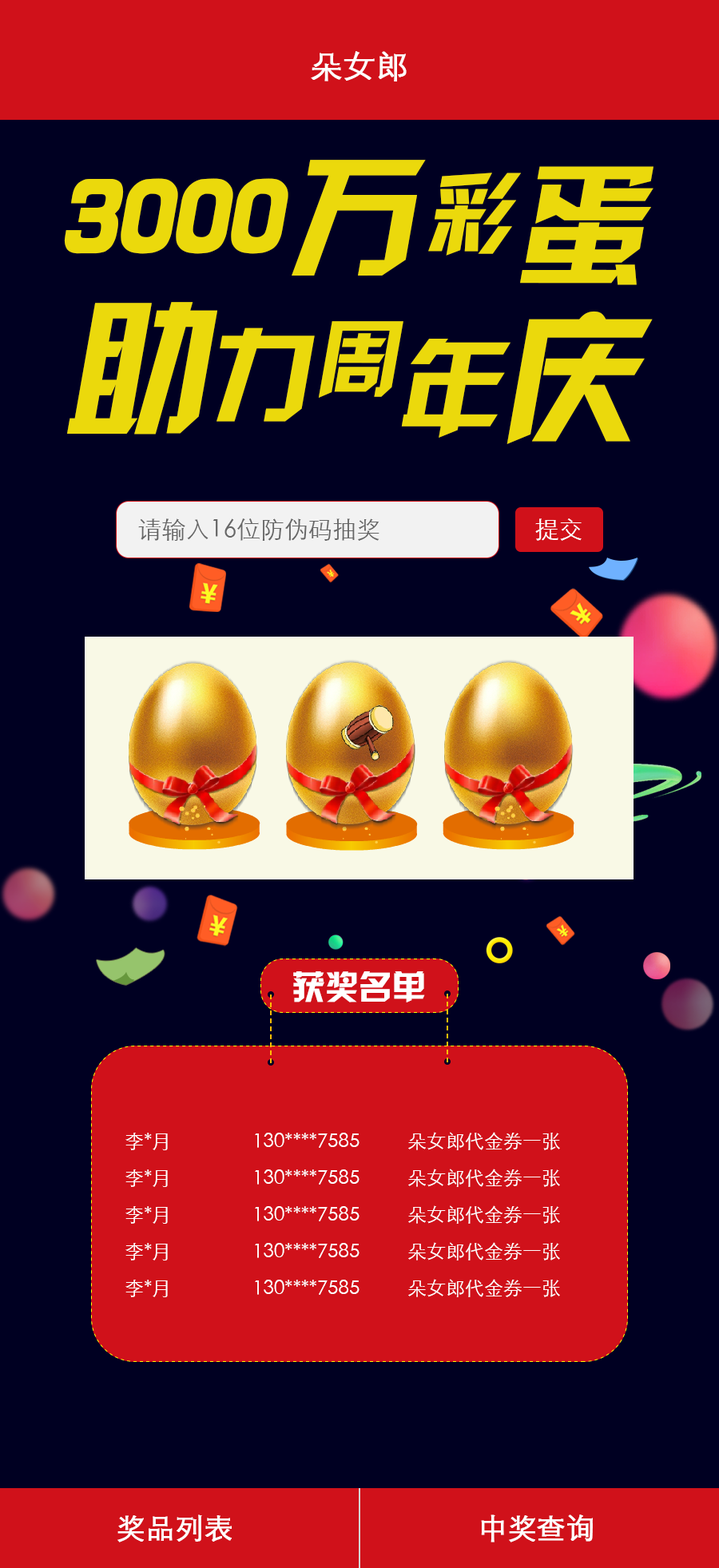
<style>
.page{position:relative;width:719px;height:1568px;background:#000022}
.page>*{position:absolute;margin:0}
.t1{font:32px "STXihei";color:#ffffff;font-weight:bold}
.t2{font:129.4px "JLinXin";color:#ebd90c;font-style:italic}
.t3{font:89.1px "JLinXin";color:#ebd90c;font-style:italic}
.t4{font:131.7px "JLinXin";color:#ebd90c;font-style:italic}
.t5{font:110.5px "JLinXin";color:#ebd90c;font-style:italic}
.t6{font:145.7px "JLinXin";color:#ebd90c;font-style:italic}
.t7{font:139.6px "JLinXin";color:#ebd90c;font-style:italic}
.t8{font:103.9px "JLinXin";color:#ebd90c;font-style:italic}
.t9{font:84px "JLinXin";color:#ebd90c;font-style:italic}
.t10{font:106.6px "JLinXin";color:#ebd90c;font-style:italic}
.t11{font:24px "STXihei";color:#666666}
.t12{font:24px "STXihei";color:#ffffff}
.t13{font:33.6px "JLinXin";color:#ffffff}
.t14{font:19.2px/36.7px "STXihei";color:#ffffff}
.t15{font:28.8px "STXihei";color:#ffffff;font-weight:bold}
</style>
<div class="page">
<p class="t1" style="left:311px;top:51px;width:96px;height:30px">朵女郎</p>
<p class="t2" style="left:292px;top:160px;width:134px;height:116px">万</p>
<p class="t3" style="left:428px;top:173px;width:94px;height:83px">彩</p>
<p class="t4" style="left:520px;top:166px;width:133px;height:119px">蛋</p>
<p class="t5" style="left:64px;top:178px;width:224px;height:76px">3000</p>
<p class="t6" style="left:67px;top:302px;width:151px;height:133px">助</p>
<p class="t7" style="left:506px;top:311px;width:147px;height:133px">庆</p>
<p class="t8" style="left:216px;top:327px;width:99px;height:95px">力</p>
<p class="t9" style="left:318px;top:321px;width:85px;height:77px">周</p>
<p class="t10" style="left:401px;top:339px;width:109px;height:99px">年</p>
<p class="t11" style="left:138px;top:518px;width:241px;height:23px">请输入16位防伪码抽奖</p>
<p class="t12" style="left:535px;top:518px;width:47px;height:23px">提交</p>
<p class="t13" style="left:293px;top:971px;width:132px;height:31px">获奖名单</p>
<p class="t14" style="left:125px;top:1132px;width:435px;height:165px">李*月                 130****7585          朵女郎代金券一张<br>李*月                 130****7585          朵女郎代金券一张<br>李*月                 130****7585          朵女郎代金券一张<br>李*月                 130****7585          朵女郎代金券一张<br>李*月                 130****7585          朵女郎代金券一张</p>
<p class="t15" style="left:117px;top:1514px;width:115px;height:28px">奖品列表</p>
<p class="t15" style="left:481px;top:1514px;width:112px;height:28px">中奖查询</p>
</div>
